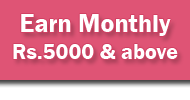
<style>
.page{position:relative;width:190px;height:100px;background:#df5475}
.page>*{position:absolute;margin:0}
.t1{font:22px "FranklinGothic-Demi";color:#ffffff}
.t2{font:26px "FranklinGothic-Demi";color:#ffffff}
</style>
<div class="page">
<p class="t1" style="left:13px;top:14px;width:165px;height:45px;text-align:center"><span class="t2">Earn Monthly </span>Rs.5000 &amp; above</p>
</div>
